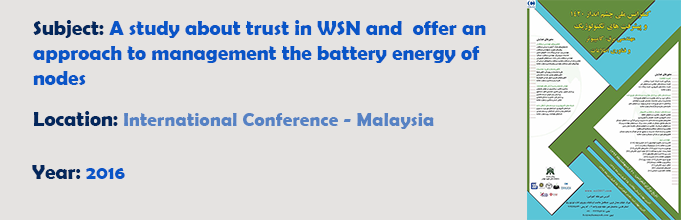
<style>
.page{position:relative;width:681px;height:220px;background:#e5e3e1}
.page>*{position:absolute;margin:0}
.t1{font:20.8px "BerlinSansFBDemi-Bold";color:#0955c7}
.t2{font:20.8px "BerlinSansFBDemi-Bold";color:#03275c}
.t3{font:19.4px "BerlinSansFBDemi-Bold";color:#5682c4}
.t4{font:19.4px "BerlinSansFBDemi-Bold";color:#0955c7}
</style>
<div class="page">
<p class="t1" style="left:33px;top:20px;width:453px;height:65px"><span class="t2">Subject: </span>A study about trust in WSN and  offer an approach to management the battery energy of nodes</p>
<p class="t3" style="left:34px;top:111px;width:400px;height:18px"><span class="t2">Location: </span>International Conference - Malaysia</p>
<p class="t2" style="left:32px;top:165px;width:93px;height:14px">Year: <span class="t4">2016</span></p>
</div>
